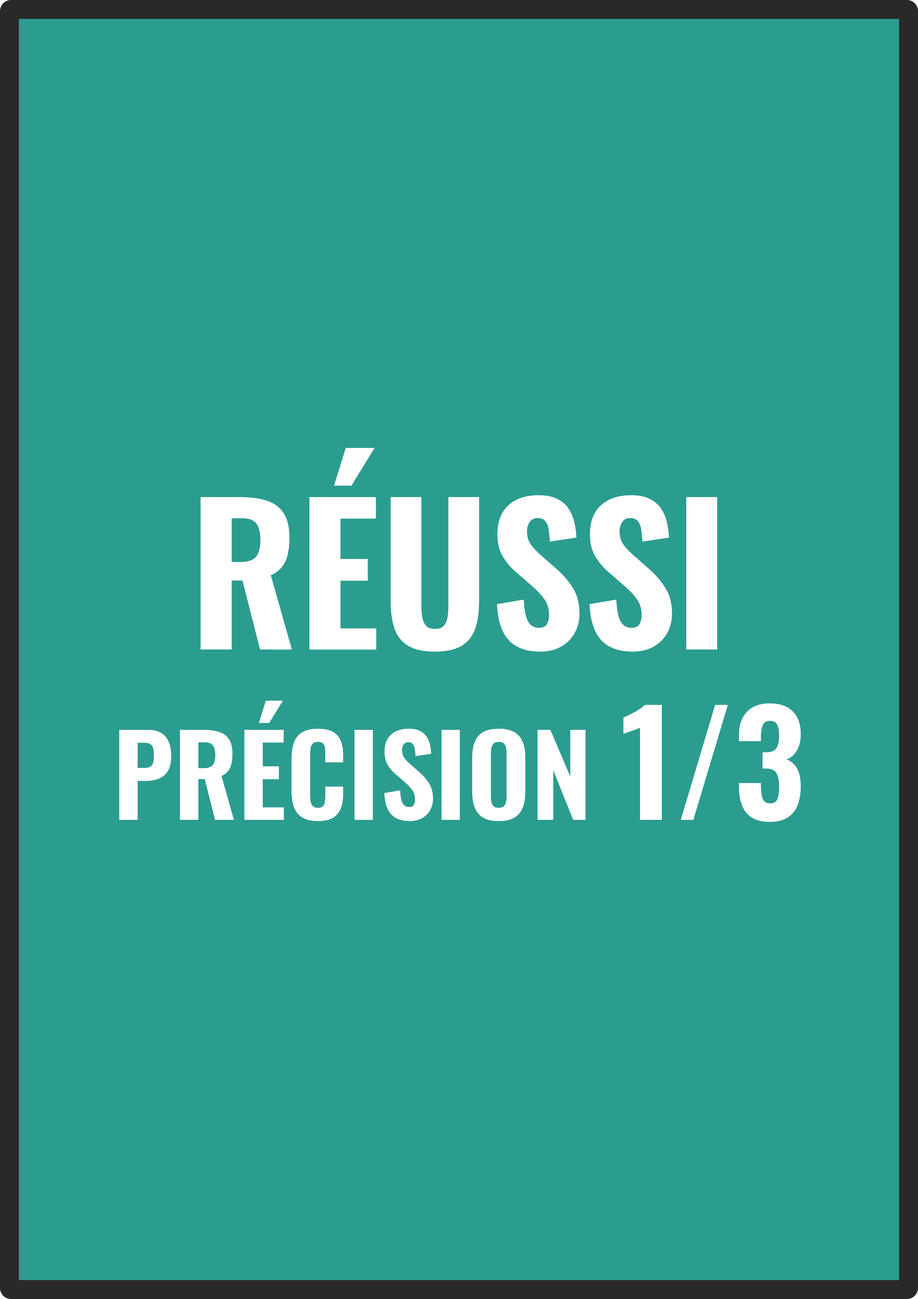
<style>
.page{position:relative;width:918px;height:1299px;background:#2a9d8f}
.page>*{position:absolute;margin:0}
.t1{font:111.1px "Oswald-SemiBold";color:#ffffff}
.t2{font:188.2px "Oswald-SemiBold";color:#ffffff}
.t3{font:141.9px "Oswald-SemiBold";color:#ffffff}
</style>
<div class="page">
<p class="t1" style="left:119px;top:448px;width:682px;height:374px;text-align:center"><span class="t2">RÉUSSI<br></span>PRÉCISION <span class="t3">1/3</span></p>
</div>
